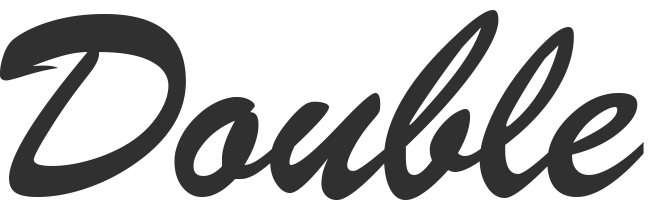
<style>
.page{position:relative;width:650px;height:200px;background:#ffffff}
.page>*{position:absolute;margin:0}
.t1{font:260px "BrushScript-BT";color:#303030}
</style>
<div class="page">
<p class="t1" style="left:0px;top:10px;width:644px;height:190px">Double</p>
</div>
